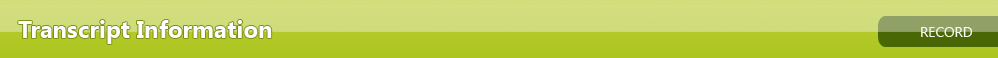
<style>
.page{position:relative;width:998px;height:58px}
.page>*{position:absolute;margin:0}
.t1{font:24px "SegoeUI-Bold";color:#fefefe}
.t2{font:14px "SegoeUI";color:#f6f7f1}
</style>
<div class="page">
<p class="t1" style="left:18px;top:20px;width:254px;height:24px">Transcript Information</p>
<p class="t2" style="left:921px;top:27px;width:51px;height:10px">RECORD</p>
</div>
